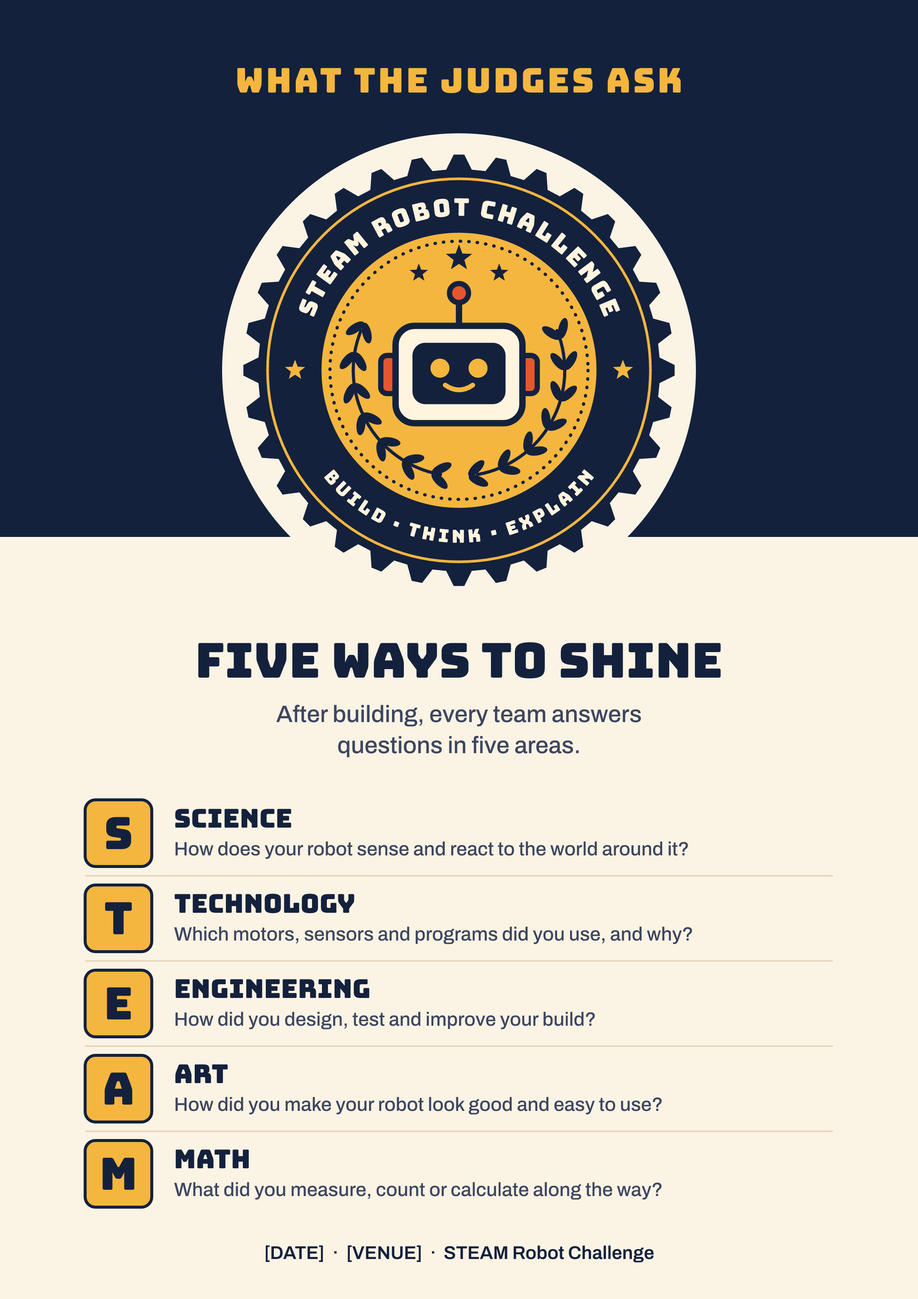
<style>
.page{position:relative;width:918px;height:1299px;background:#fbf3e4}
.page>*{position:absolute;margin:0}
.t1{font:34.1px "Bungee-Regular";letter-spacing:0.065em;color:#f4b63f}
.t2{font:48.1px "Bungee-Regular";color:#14213d}
.t3{font:23.7px/31.1px "Archivo-Medium";color:#3d4660}
.t4{font:25.9px "Bungee-Regular";color:#14213d}
.t5{font:44.4px "Bungee-Regular";color:#14213d}
.t6{font:19.3px "Archivo-Medium";color:#3d4660}
.t7{font:18.5px "Archivo-SemiBold";color:#14213d}
</style>
<div class="page">
<p class="t1" style="left:237px;top:68px;width:444px;height:25px">WHAT THE JUDGES ASK</p>
<p class="t2" style="left:198px;top:642px;width:523px;height:36px">Five ways to shine</p>
<p class="t3" style="left:276px;top:705px;width:365px;height:52px;text-align:center">After building, every team answers<br>questions in five areas.</p>
<p class="t4" style="left:175px;top:809px;width:116px;height:18px">SCIENCE</p>
<p class="t5" style="left:106px;top:817px;width:25px;height:32px">S</p>
<p class="t6" style="left:175px;top:841px;width:513px;height:18px">How does your robot sense and react to the world around it?</p>
<p class="t4" style="left:175px;top:893px;width:179px;height:20px">TECHNOLOGY</p>
<p class="t5" style="left:105px;top:902px;width:27px;height:32px">T</p>
<p class="t6" style="left:174px;top:926px;width:518px;height:18px">Which motors, sensors and programs did you use, and why?</p>
<p class="t5" style="left:107px;top:987px;width:24px;height:32px">E</p>
<p class="t4" style="left:175px;top:979px;width:194px;height:19px">ENGINEERING</p>
<p class="t6" style="left:175px;top:1011px;width:420px;height:18px">How did you design, test and improve your build?</p>
<p class="t5" style="left:104px;top:1072px;width:29px;height:32px">A</p>
<p class="t4" style="left:175px;top:1064px;width:53px;height:19px">ART</p>
<p class="t6" style="left:175px;top:1097px;width:487px;height:17px">How did you make your robot look good and easy to use?</p>
<p class="t5" style="left:103px;top:1157px;width:31px;height:33px">M</p>
<p class="t4" style="left:175px;top:1149px;width:74px;height:19px">MATH</p>
<p class="t6" style="left:174px;top:1182px;width:488px;height:18px">What did you measure, count or calculate along the way?</p>
<p class="t7" style="left:266px;top:1245px;width:388px;height:17px">[DATE]  ·  [VENUE]  ·  STEAM Robot Challenge</p>
</div>
